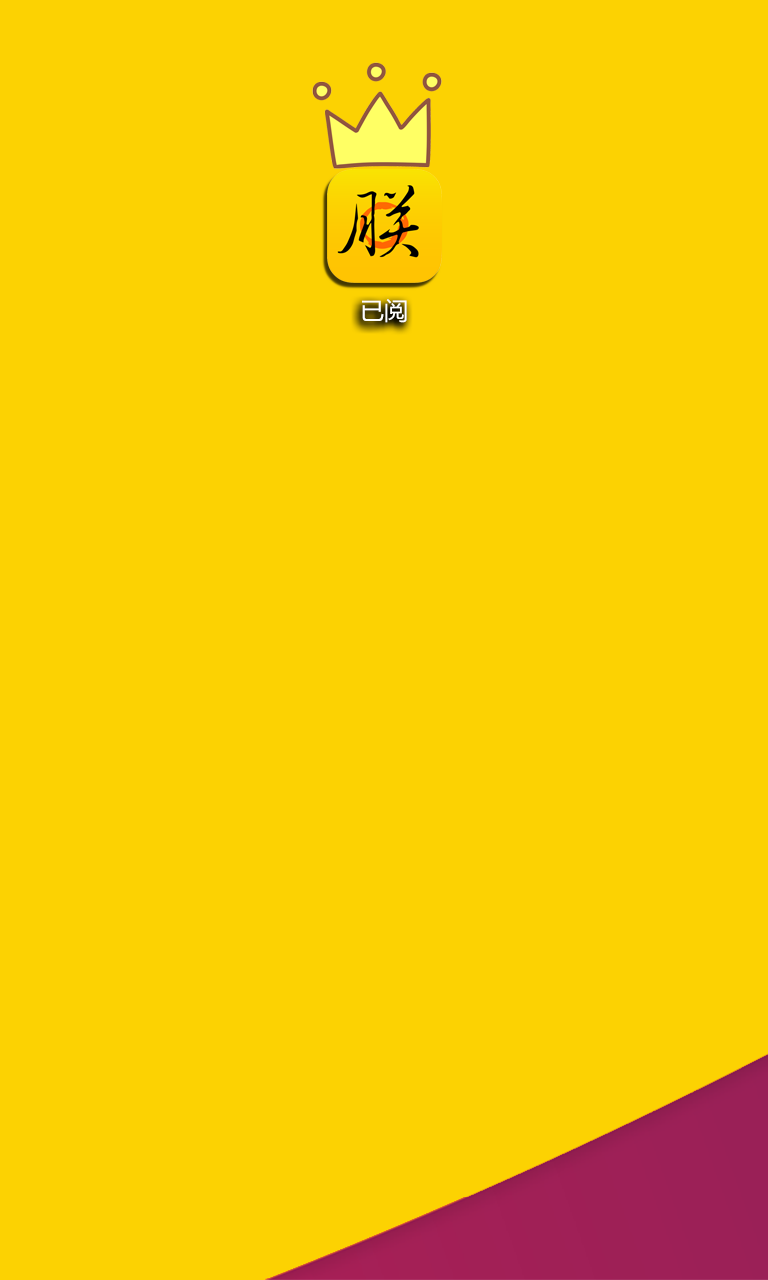
<style>
.page{position:relative;width:768px;height:1280px;background:#fcd202}
.page>*{position:absolute;margin:0}
.t1{font:24px "MicrosoftYaHei";color:#ffffff}
</style>
<div class="page">
<p class="t1" style="left:362px;top:299px;width:45px;height:24px">已阅</p>
</div>
